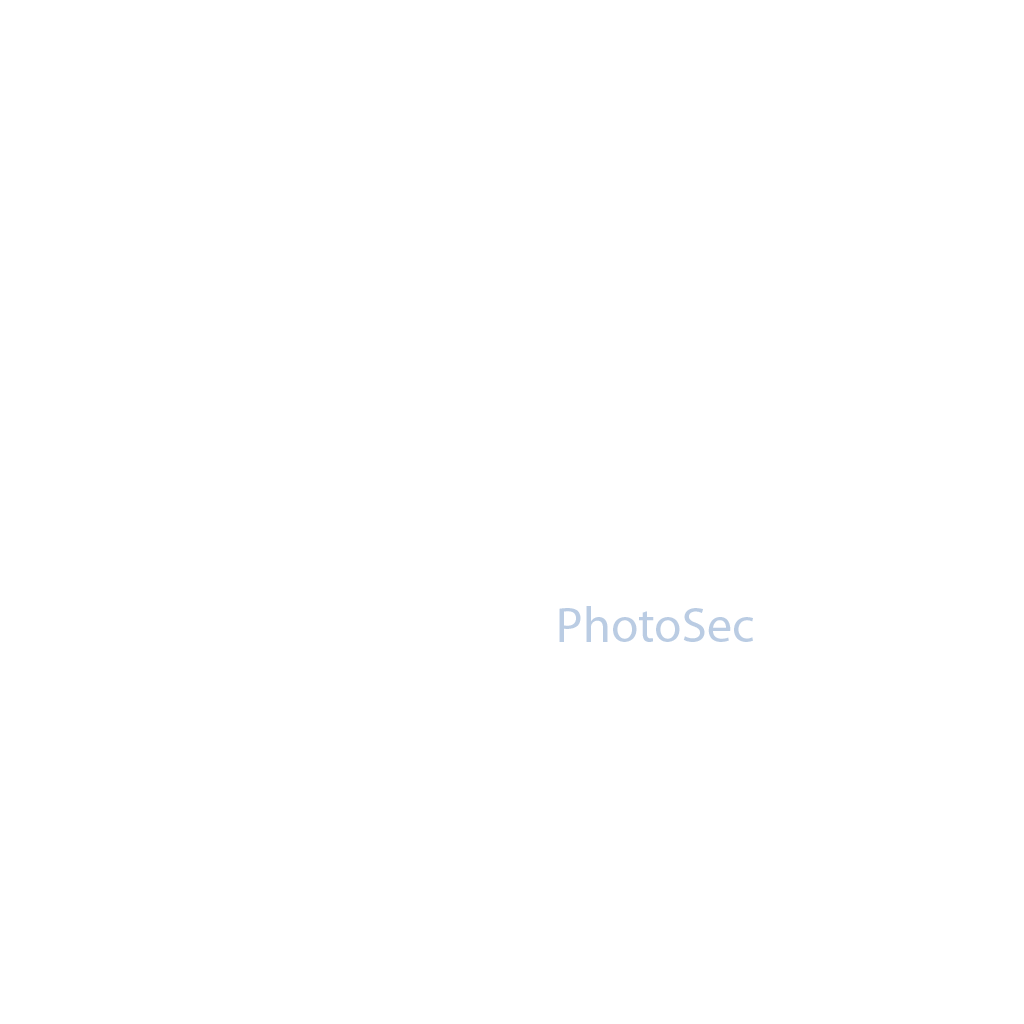
<style>
.page{position:relative;width:1024px;height:1024px;background:#ffffff}
.page>*{position:absolute;margin:0}
.t1{font:50px "MyriadPro-Regular";color:#bacce3}
</style>
<div class="page">
<p class="t1" style="left:559px;top:606px;width:194px;height:36px">PhotoSec</p>
</div>
